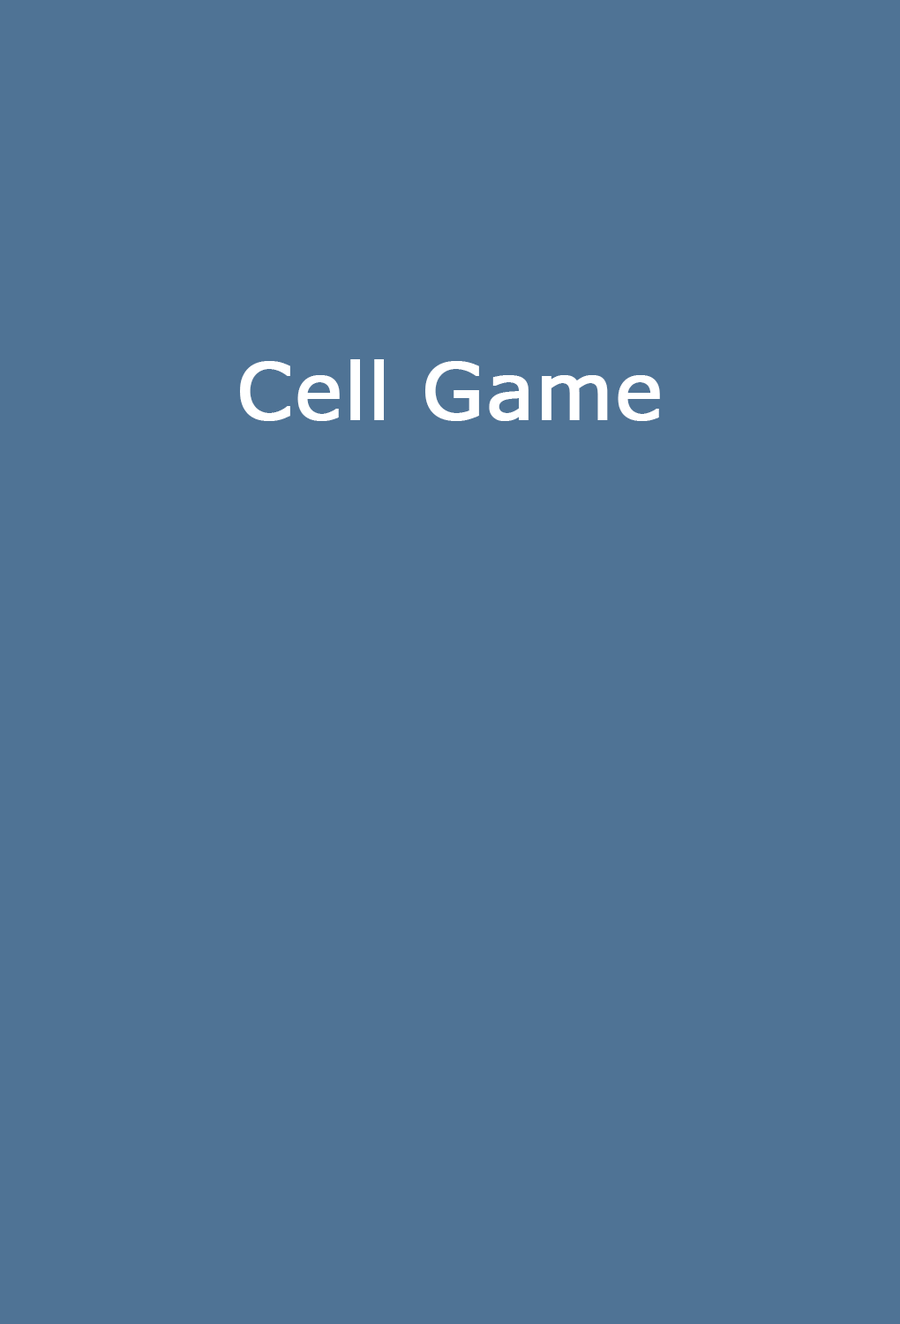
<style>
.page{position:relative;width:900px;height:1324px;background:#4f7395}
.page>*{position:absolute;margin:0}
.t1{font:79.6px "MSReferenceSansSerif";color:#ffffff;font-weight:bold}
</style>
<div class="page">
<p class="t1" style="left:240px;top:359px;width:420px;height:62px">Cell Game</p>
</div>
